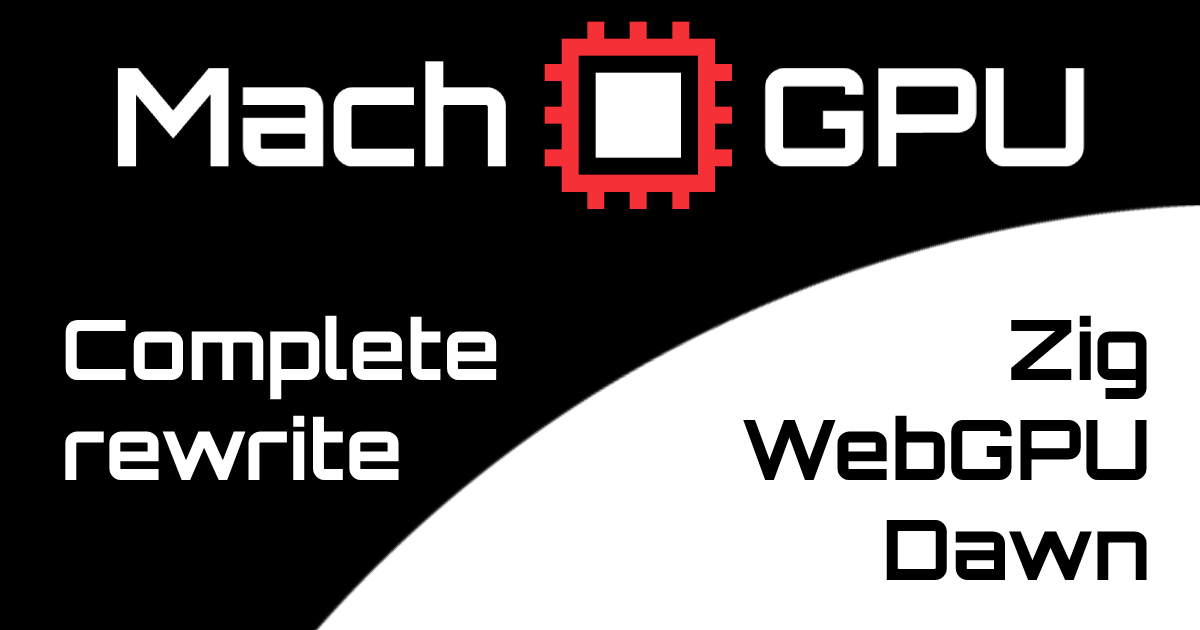
<style>
.page{position:relative;width:1200px;height:630px;background:#000000}
.page>*{position:absolute;margin:0}
.t1{font:83.4px "Orbitron-Bold";color:#ffffff}
.t2{font:83.4px "Orbitron-Bold";color:#000000}
</style>
<div class="page">
<p class="t1" style="left:65px;top:315px;width:432px;height:165px">Complete<br>rewrite</p>
<p class="t2" style="left:743px;top:315px;width:404px;height:265px;text-align:right">Zig<br>WebGPU<br>Dawn</p>
</div>
